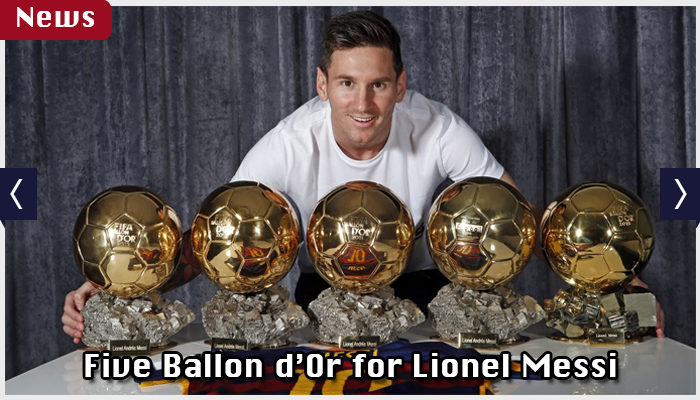
<style>
.page{position:relative;width:700px;height:400px}
.page>*{position:absolute;margin:0}
.t1{font:27.2px "Chicago";color:#ffffff}
.t2{font:51.2px "Chicago";color:#ffffff;scale:0.51 1}
.t3{font:30.6px "Chicago";color:#ffffff}
</style>
<div class="page">
<p class="t1" style="left:17px;top:7px;width:77px;height:20px">News</p>
<p class="t2" style="left:10px;top:179px;width:13px;height:30px">&lt;</p>
<p class="t2" style="left:674px;top:179px;width:13px;height:30px;rotate:180deg">&lt;</p>
<p class="t3" style="left:85px;top:353px;width:531px;height:24px">Five Ballon d’Or for Lionel Messi</p>
</div>
